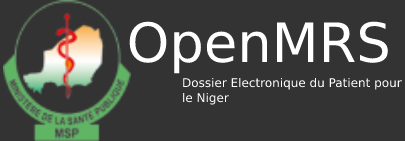
<style>
.page{position:relative;width:405px;height:141px;background:#333333}
.page>*{position:absolute;margin:0}
.t1{font:54.3px "DejaVuSans";color:#ffffff}
.t2{font:12px "DejaVuSans";color:#ffffff}
</style>
<div class="page">
<p class="t1" style="left:129px;top:21px;width:259px;height:53px">OpenMRS</p>
<p class="t2" style="left:183px;top:77px;width:219px;height:28px">Dossier Electronique du Patient pour le Niger</p>
</div>
